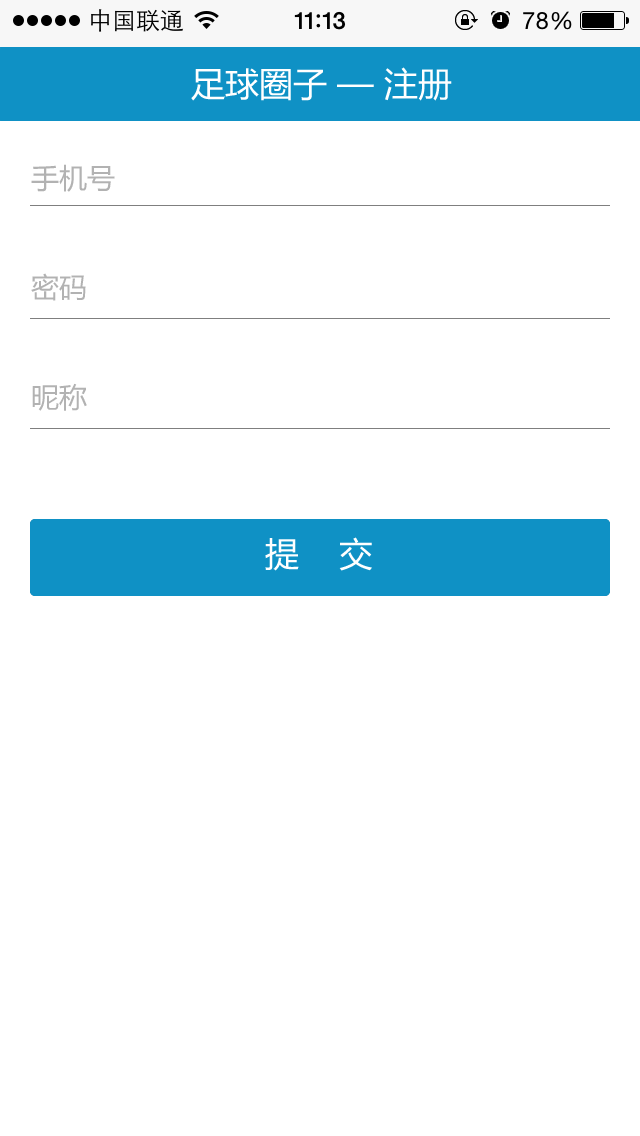
<style>
.page{position:relative;width:640px;height:1136px;background:#ffffff}
.page>*{position:absolute;margin:0}
.t1{font:34px "MicrosoftYaHei";color:#ffffff}
.t2{font:28px "MicrosoftYaHei";color:#b2b2b2}
</style>
<div class="page">
<p class="t1" style="left:191px;top:67px;width:261px;height:34px">足球圈子 — 注册</p>
<p class="t2" style="left:31px;top:164px;width:84px;height:28px">手机号</p>
<p class="t2" style="left:31px;top:273px;width:55px;height:28px">密码</p>
<p class="t2" style="left:32px;top:383px;width:55px;height:28px">昵称</p>
<p class="t1" style="left:265px;top:537px;width:107px;height:34px">提    交</p>
</div>
